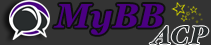
<style>
.page{position:relative;width:211px;height:45px;background:#333333}
.page>*{position:absolute;margin:0}
.t1{font:33.8px "Georgia-BoldItalic";color:#4b0082}
</style>
<div class="page">
<p class="t1" style="left:53px;top:4px;width:111px;height:31px">MyBB</p>
</div>
